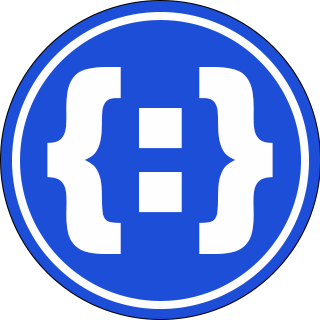
<style>
.page{position:relative;width:320px;height:320px;background:#1d4ed8}
.page>*{position:absolute;margin:0}
.t1{font:200px "Arial-Black";letter-spacing:0.02em;color:#fefefe}
</style>
<div class="page">
<p class="t1" style="left:47px;top:67px;width:226px;height:187px">{:}</p>
</div>
